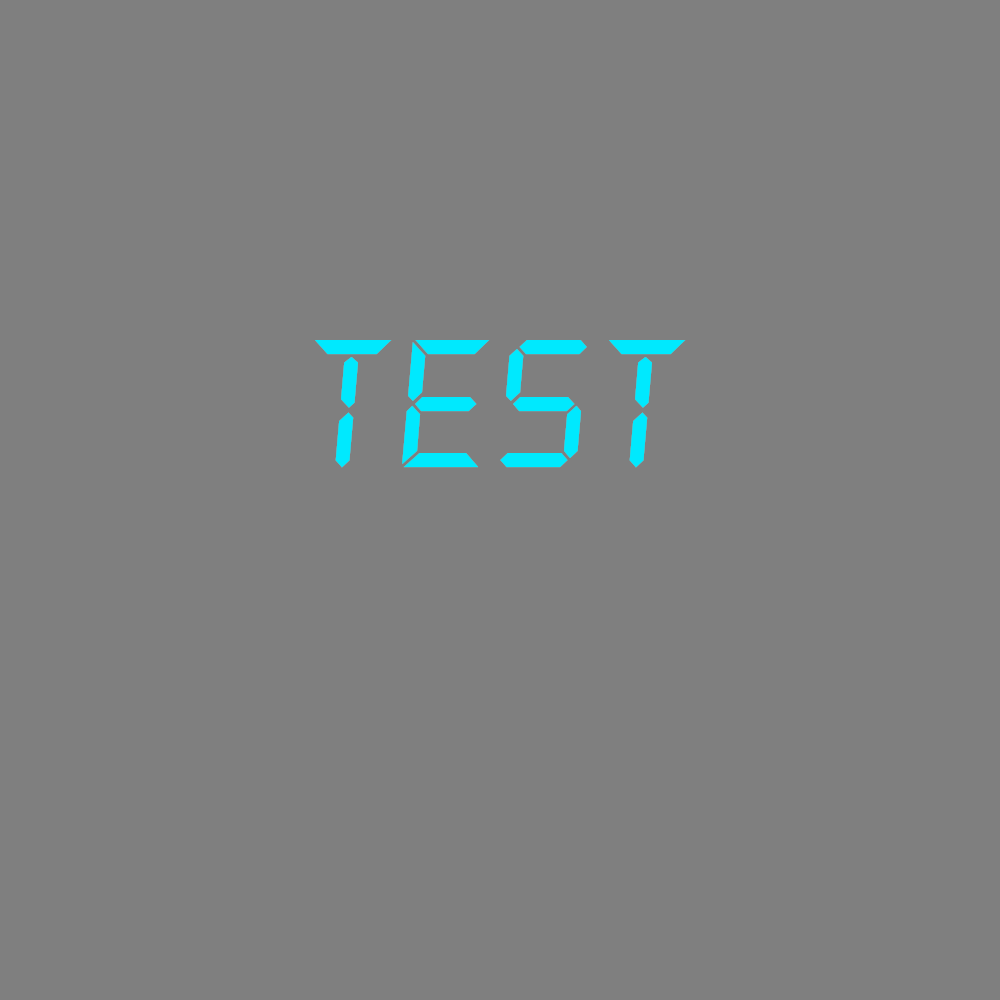
<style>
.page{position:relative;width:1000px;height:1000px;background:#7f7f7f}
.page>*{position:absolute;margin:0}
.t1{font:200px "DS-Digital-Italic";color:#00e9fe}
</style>
<div class="page">
<p class="t1" style="left:315px;top:340px;width:371px;height:128px">test</p>
</div>
